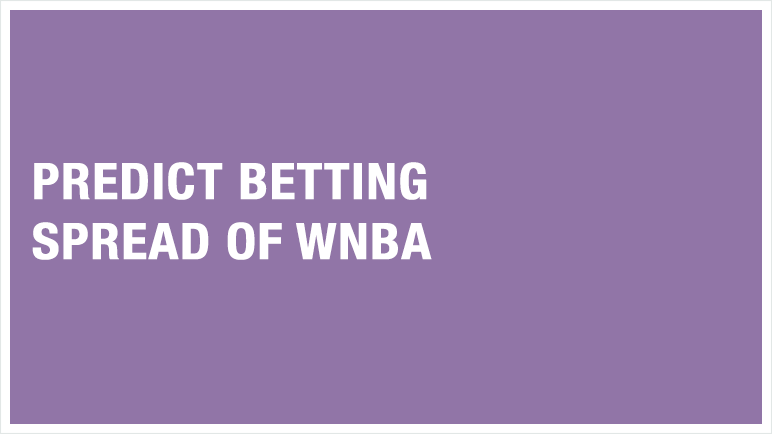
<style>
.page{position:relative;width:772px;height:434px;background:#9175a7}
.page>*{position:absolute;margin:0}
.t1{font:50px "HelveticaNeue-CondensedBold";color:#ffffff;font-weight:bold;scale:1.07 1}
</style>
<div class="page">
<p class="t1" style="left:32px;top:162px;width:400px;height:98px">PREDICT BETTING <br>SPREAD OF WNBA</p>
</div>
